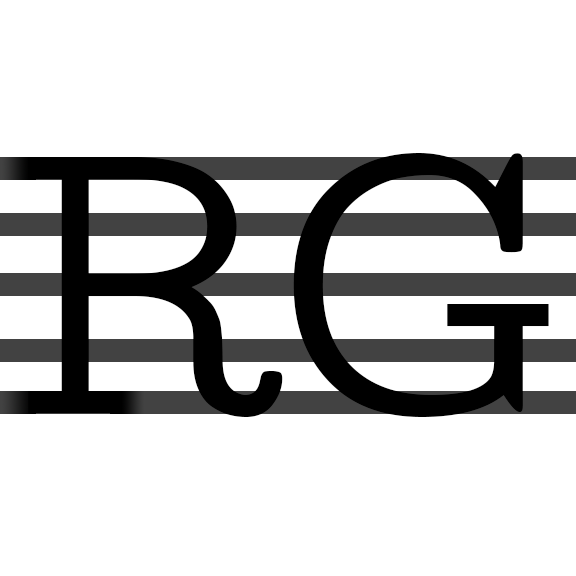
<style>
.page{position:relative;width:576px;height:576px;background:#ffffff}
.page>*{position:absolute;margin:0}
.t1{font:375px "CMUConcrete-Roman";color:#000000}
</style>
<div class="page">
<p class="t1" style="left:28px;top:153px;width:521px;height:264px">RG</p>
</div>
